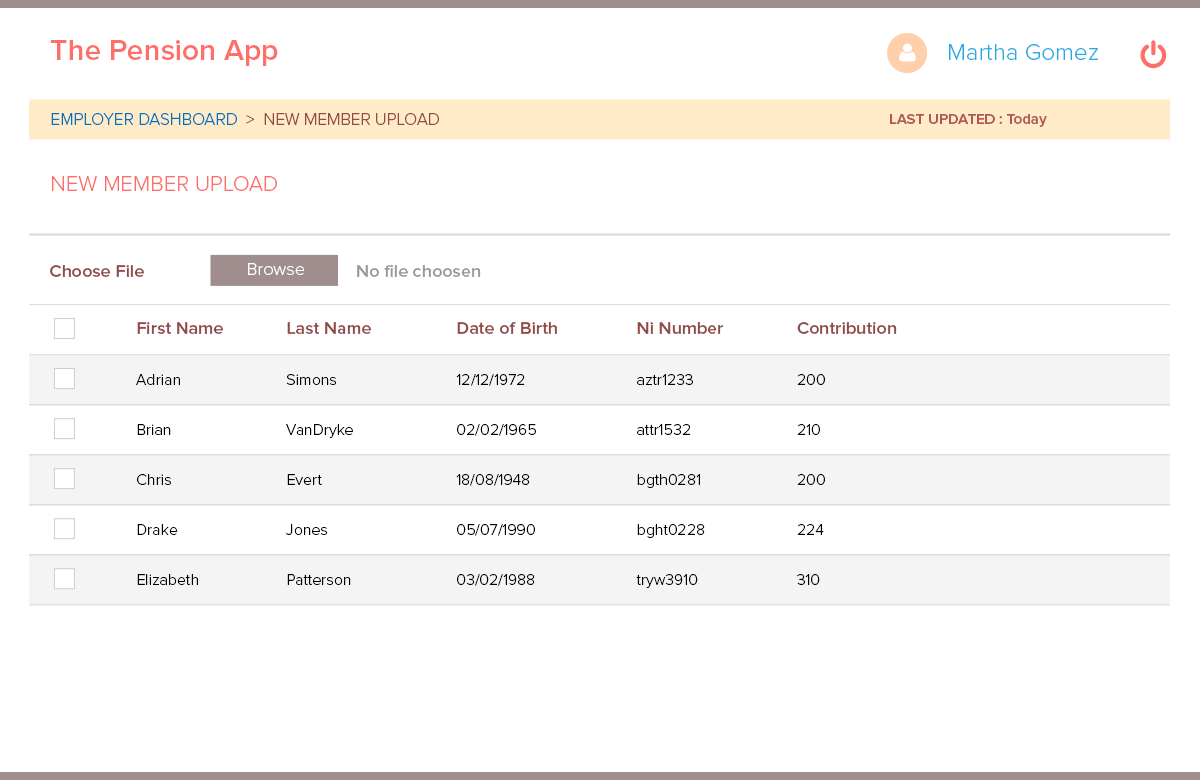
<style>
.page{position:relative;width:1200px;height:780px;background:#ffffff}
.page>*{position:absolute;margin:0}
.t1{font:30px "ProximaNova-Semibold";color:#ff6f69}
.t2{font:24px "ProximaNova-Light";color:#29abe2}
.t3{font:17px "ProximaNova-Light";color:#914a4a}
.t4{font:17px "ProximaNova-Light";color:#0071bc}
.t5{font:15px "ProximaNova-Semibold";color:#af5858}
.t6{font:22px "ProximaNova-Light";color:#ff6f69}
.t7{font:18px "ProximaNova-Semibold";color:#914a4a}
.t8{font:18px "ProximaNova-Light";color:#ffffff}
.t9{font:18px "ProximaNova-Semibold";color:#999999}
.t10{font:17.1px "ProximaNova-Semibold";color:#914a4a;scale:1.05 1}
.t11{font:16px "ProximaNova-Light";color:#000000}
</style>
<div class="page">
<p class="t1" style="left:51px;top:40px;width:227px;height:26px">The Pension App</p>
<p class="t2" style="left:949px;top:44px;width:149px;height:16px">Martha Gomez</p>
<p class="t3" style="left:51px;top:113px;width:388px;height:12px"><span class="t4">EMPLOYER DASHBOARD</span>  &gt;  NEW MEMBER UPLOAD</p>
<p class="t5" style="left:890px;top:114px;width:157px;height:13px">LAST UPDATED : Today</p>
<p class="t6" style="left:52px;top:176px;width:225px;height:15px">NEW MEMBER UPLOAD</p>
<p class="t7" style="left:50px;top:265px;width:94px;height:12px">Choose File</p>
<p class="t8" style="left:248px;top:263px;width:57px;height:12px">Browse</p>
<p class="t9" style="left:357px;top:264px;width:124px;height:13px">No file choosen</p>
<p class="t7" style="left:137px;top:322px;width:86px;height:12px">First Name</p>
<p class="t10" style="left:287px;top:322px;width:84px;height:12px">Last Name</p>
<p class="t7" style="left:457px;top:322px;width:100px;height:12px">Date of Birth</p>
<p class="t7" style="left:637px;top:322px;width:86px;height:12px">Ni Number</p>
<p class="t7" style="left:797px;top:322px;width:100px;height:12px">Contribution</p>
<p class="t11" style="left:136px;top:374px;width:44px;height:11px">Adrian</p>
<p class="t11" style="left:286px;top:374px;width:51px;height:11px">Simons</p>
<p class="t11" style="left:456px;top:374px;width:69px;height:12px">12/12/1972</p>
<p class="t11" style="left:637px;top:374px;width:56px;height:11px">aztr1233</p>
<p class="t11" style="left:797px;top:374px;width:28px;height:11px">200</p>
<p class="t11" style="left:137px;top:424px;width:34px;height:11px">Brian</p>
<p class="t11" style="left:286px;top:424px;width:67px;height:14px">VanDryke</p>
<p class="t11" style="left:457px;top:424px;width:79px;height:12px">02/02/1965</p>
<p class="t11" style="left:637px;top:424px;width:53px;height:11px">attr1532</p>
<p class="t11" style="left:797px;top:424px;width:23px;height:11px">210</p>
<p class="t11" style="left:137px;top:474px;width:34px;height:11px">Chris</p>
<p class="t11" style="left:287px;top:474px;width:35px;height:11px">Evert</p>
<p class="t11" style="left:456px;top:474px;width:74px;height:12px">18/08/1948</p>
<p class="t11" style="left:637px;top:474px;width:63px;height:14px">bgth0281</p>
<p class="t11" style="left:797px;top:474px;width:28px;height:11px">200</p>
<p class="t11" style="left:137px;top:524px;width:41px;height:11px">Drake</p>
<p class="t11" style="left:286px;top:524px;width:42px;height:11px">Jones</p>
<p class="t11" style="left:457px;top:524px;width:78px;height:12px">05/07/1990</p>
<p class="t11" style="left:637px;top:524px;width:68px;height:14px">bght0228</p>
<p class="t11" style="left:797px;top:524px;width:27px;height:11px">224</p>
<p class="t11" style="left:137px;top:574px;width:61px;height:11px">Elizabeth</p>
<p class="t11" style="left:287px;top:574px;width:64px;height:11px">Patterson</p>
<p class="t11" style="left:457px;top:574px;width:78px;height:12px">03/02/1988</p>
<p class="t11" style="left:636px;top:574px;width:62px;height:14px">tryw3910</p>
<p class="t11" style="left:797px;top:574px;width:23px;height:11px">310</p>
</div>
